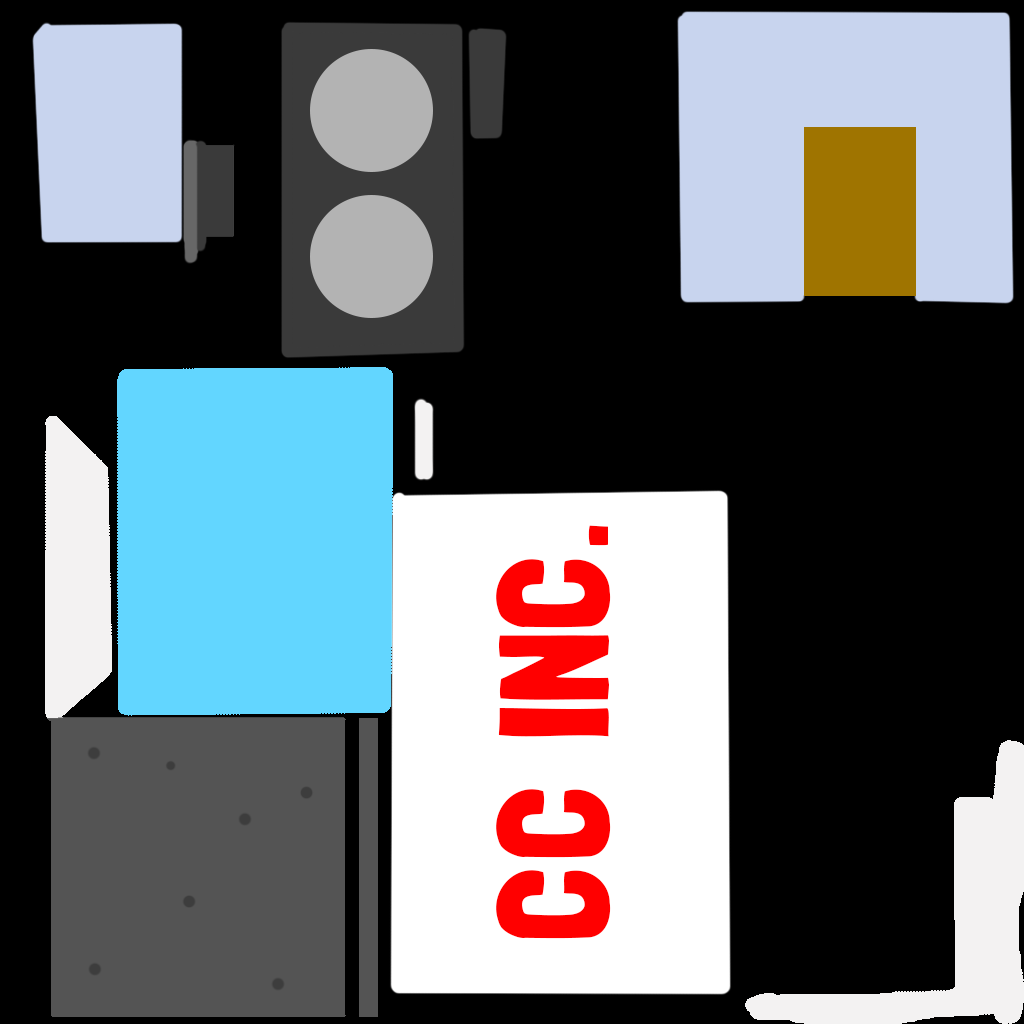
<style>
.page{position:relative;width:1024px;height:1024px;background:#000000}
.page>*{position:absolute;margin:0}
.t1{font:154px "LondrinaSolid-Regular";color:#ff0000}
</style>
<div class="page">
<p class="t1" style="left:496px;top:525px;width:115px;height:414px;rotate:-90deg">CC INC.</p>
</div>
